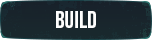
<style>
.page{position:relative;width:152px;height:40px}
.page>*{position:absolute;margin:0}
.t1{font:24px "BebasNeue-Regular";color:#ffffff}
</style>
<div class="page">
<p class="t1" style="left:56px;top:11px;width:40px;height:17px">Build</p>
</div>
